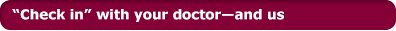
<style>
.page{position:relative;width:396px;height:31px;background:#860038}
.page>*{position:absolute;margin:0}
.t1{font:13.5px "Verdana-Bold";letter-spacing:-0.005em;color:#ffffff}
</style>
<div class="page">
<p class="t1" style="left:12px;top:9px;width:272px;height:13px">“Check in” with your doctor—and us</p>
</div>
